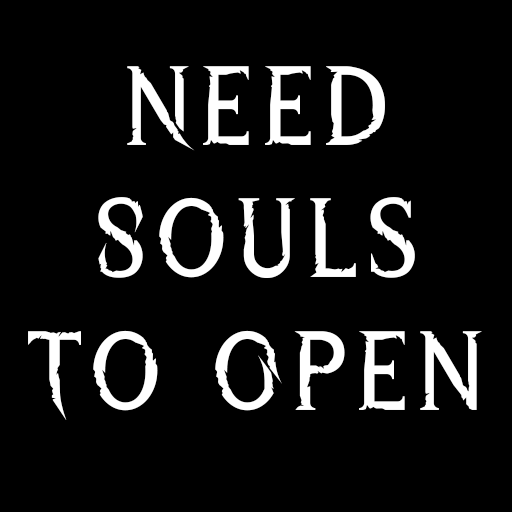
<style>
.page{position:relative;width:512px;height:512px;background:#000000}
.page>*{position:absolute;margin:0}
.t1{font:110.8px "WreckedShipRegular";letter-spacing:0.05em;color:#ffffff}
</style>
<div class="page">
<p class="t1" style="left:28px;top:66px;width:454px;height:354px;text-align:center">Need<br>Souls<br>To Open</p>
</div>
